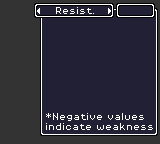
<style>
.page{position:relative;width:160px;height:144px;background:#222034}
.page>*{position:absolute;margin:0}
.t1{font:8px "PixelOperator8";color:#ffffff}
</style>
<div class="page">
<p class="t1" style="left:56px;top:7px;width:38px;height:7px">Resist.</p>
<p class="t1" style="left:46px;top:113px;width:107px;height:17px">*Negative values<br>indicate weakness</p>
</div>
